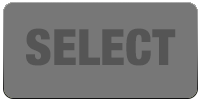
<style>
.page{position:relative;width:200px;height:100px;background:#777777}
.page>*{position:absolute;margin:0}
.t1{font:50px "HelveticaNeue-CondensedBlack";color:#555555}
</style>
<div class="page">
<p class="t1" style="left:26px;top:28px;width:150px;height:38px">SELECT</p>
</div>
